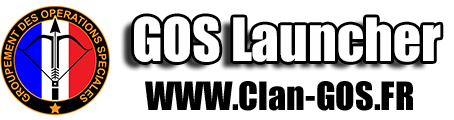
<style>
.page{position:relative;width:454px;height:120px;background:#ffffff}
.page>*{position:absolute;margin:0}
.t1{font:55px "Impact";color:#fffefe}
.t2{font:36px "Impact";color:#000000}
</style>
<div class="page">
<p class="t1" style="left:134px;top:16px;width:307px;height:46px">GOS Launcher</p>
<p class="t2" style="left:145px;top:81px;width:268px;height:30px">WWW.Clan-GOS.FR</p>
</div>
